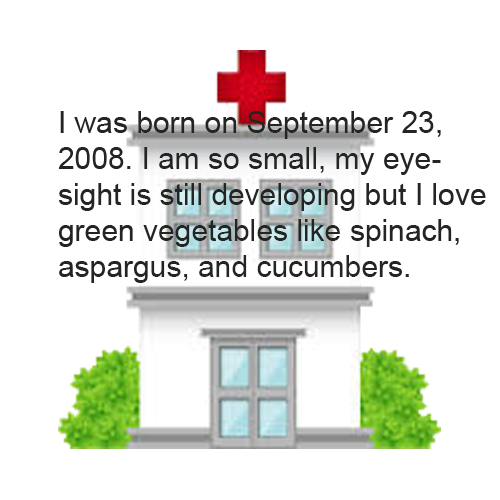
<style>
.page{position:relative;width:500px;height:500px;background:#ffffff}
.page>*{position:absolute;margin:0}
.t1{font:30px "ArialMT";color:#232523}
</style>
<div class="page">
<p class="t1" style="left:58px;top:111px;width:428px;height:172px">I was born on September 23, 2008. I am so small, my eyesight is still developing but I love green vegetables like spinach, aspargus, and cucumbers.</p>
</div>
